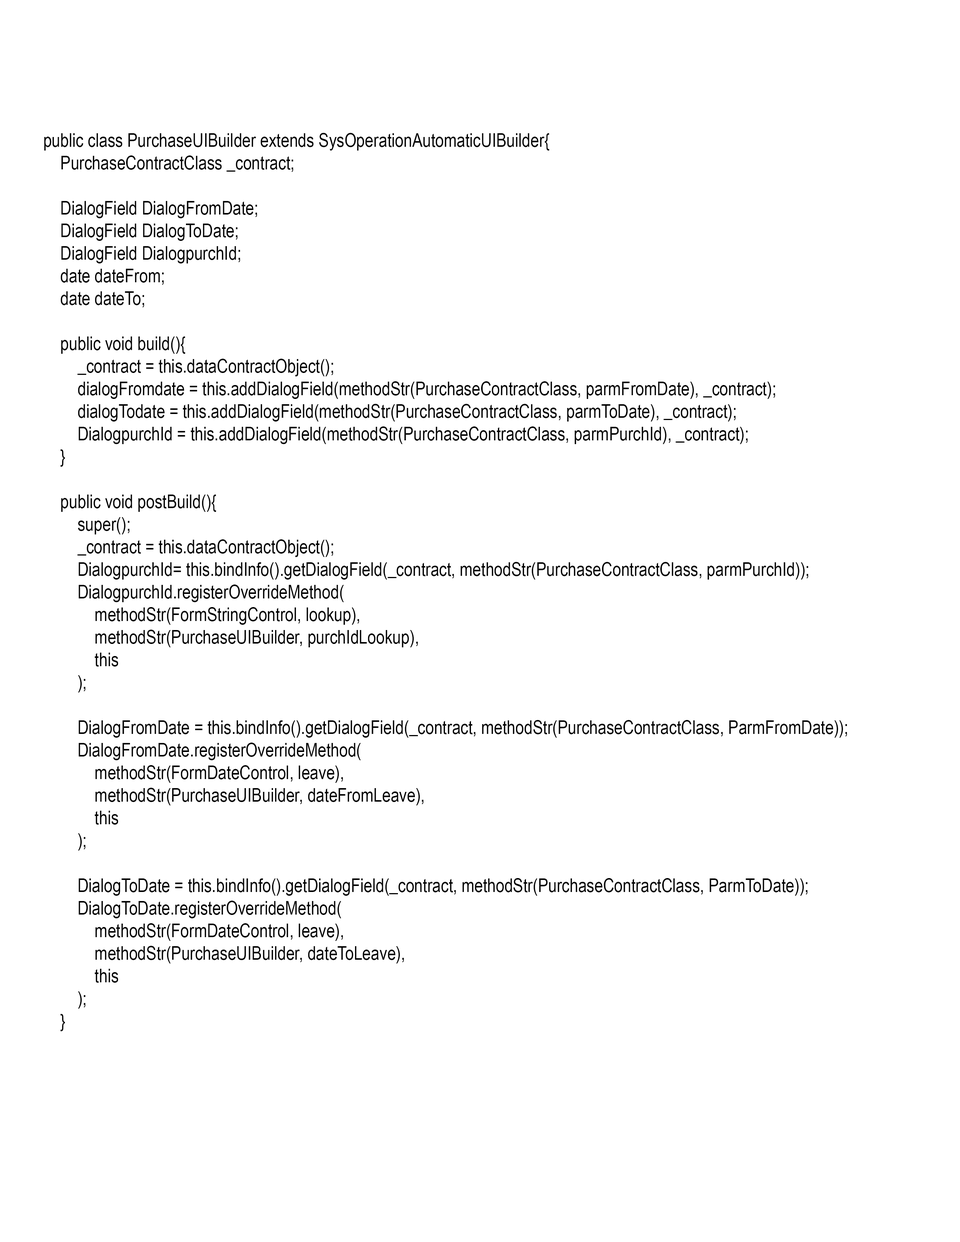
<style>
.page{position:relative;width:960px;height:1242px;background:#ffffff}
.page>*{position:absolute;margin:0}
.t1{font:18.8px "ArialNarrow";color:#000000}
</style>
<div class="page">
<p class="t1" style="left:44px;top:133px;width:803px;height:898px">public class PurchaseUIBuilder extends SysOperationAutomaticUIBuilder{<br>    PurchaseContractClass _contract;<br><br>    DialogField DialogFromDate;<br>    DialogField DialogToDate;<br>    DialogField DialogpurchId;<br>    date dateFrom;<br>    date dateTo;<br><br>    public void build(){<br>        _contract = this.dataContractObject();<br>        dialogFromdate = this.addDialogField(methodStr(PurchaseContractClass, parmFromDate), _contract);<br>        dialogTodate = this.addDialogField(methodStr(PurchaseContractClass, parmToDate), _contract);<br>        DialogpurchId = this.addDialogField(methodStr(PurchaseContractClass, parmPurchId), _contract);<br>    }<br><br>    public void postBuild(){<br>        super();<br>        _contract = this.dataContractObject();<br>        DialogpurchId= this.bindInfo().getDialogField(_contract, methodStr(PurchaseContractClass, parmPurchId));<br>        DialogpurchId.registerOverrideMethod(<br>            methodStr(FormStringControl, lookup), <br>            methodStr(PurchaseUIBuilder, purchIdLookup), <br>            this<br>        );<br><br>        DialogFromDate = this.bindInfo().getDialogField(_contract, methodStr(PurchaseContractClass, ParmFromDate));<br>        DialogFromDate.registerOverrideMethod(<br>            methodStr(FormDateControl, leave), <br>            methodStr(PurchaseUIBuilder, dateFromLeave), <br>            this<br>        );<br><br>        DialogToDate = this.bindInfo().getDialogField(_contract, methodStr(PurchaseContractClass, ParmToDate));<br>        DialogToDate.registerOverrideMethod(<br>            methodStr(FormDateControl, leave), <br>            methodStr(PurchaseUIBuilder, dateToLeave), <br>            this<br>        );<br>    }</p>
</div>
